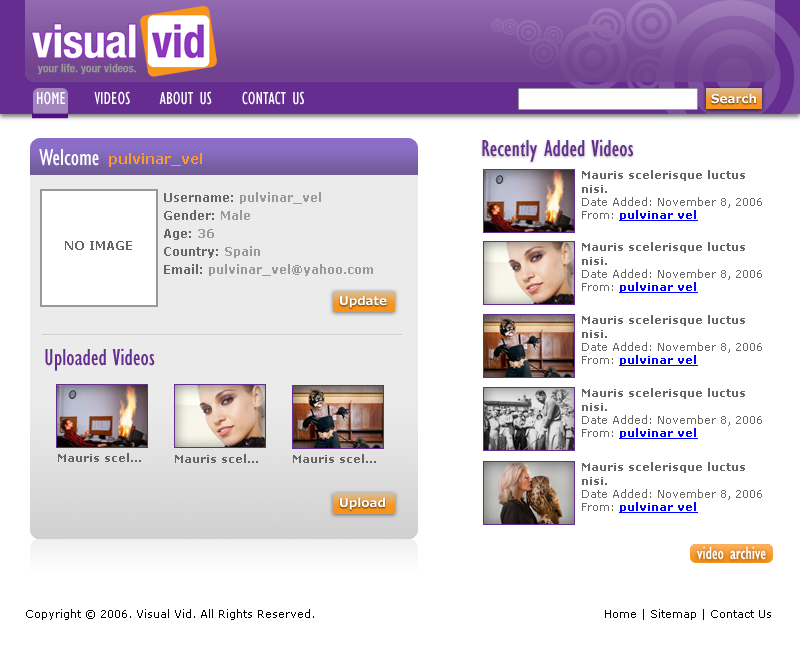
<style>
.page{position:relative;width:800px;height:654px;background:#ffffff}
.page>*{position:absolute;margin:0}
.t1{font:18px "GillSansMT-Condensed";color:#ffffff}
.t2{font:12px "Verdana-Bold";color:#ffffff}
.t3{font:24px "GillSansMT-Condensed";color:#ffffff}
.t4{font:24px "GillSansMT-Condensed";color:#662d91}
.t5{font:14px "Verdana-Bold";color:#ff9933}
.t6{font:11px "Verdana";color:#666666}
.t7{font:11px "Verdana-Bold";color:#666666}
.t8{font:11px "Verdana-Bold";color:#0000ff;text-decoration:underline}
.t9{font:12px/18px "Verdana-Bold";color:#999999}
.t10{font:12px/18px "Verdana-Bold";color:#666666}
.t11{font:12px "Verdana-Bold";color:#666666}
.t12{font:11px "Verdana";color:#000000}
</style>
<div class="page">
<p class="t1" style="left:37px;top:91px;width:267px;height:14px">HOME     VIDEOS     ABOUT US     CONTACT US</p>
<p class="t2" style="left:711px;top:93px;width:45px;height:11px">Search</p>
<p class="t3" style="left:39px;top:149px;width:60px;height:17px">Welcome</p>
<p class="t4" style="left:482px;top:139px;width:151px;height:23px">Recently Added Videos</p>
<p class="t5" style="left:109px;top:153px;width:93px;height:14px">pulvinar_vel</p>
<p class="t6" style="left:582px;top:170px;width:180px;height:51px"><span class="t7">Mauris scelerisque luctus nisi.<br></span>Date Added: November 8, 2006<br>From: <span class="t8">pulvinar vel</span></p>
<p class="t9" style="left:164px;top:192px;width:209px;height:84px;text-align:justify"><span class="t10">Username: </span>pulvinar_vel<br><span class="t10">Gender:</span> Male<br><span class="t10">Age: </span>36<br><span class="t10">Country:</span> Spain<br><span class="t10">Email:</span> pulvinar_vel@yahoo.com</p>
<p class="t11" style="left:65px;top:241px;width:67px;height:9px">NO IMAGE</p>
<p class="t6" style="left:582px;top:242px;width:180px;height:51px"><span class="t7">Mauris scelerisque luctus nisi.<br></span>Date Added: November 8, 2006<br>From: <span class="t8">pulvinar vel</span></p>
<p class="t2" style="left:340px;top:295px;width:47px;height:13px">Update</p>
<p class="t6" style="left:582px;top:315px;width:180px;height:51px"><span class="t7">Mauris scelerisque luctus nisi.<br></span>Date Added: November 8, 2006<br>From: <span class="t8">pulvinar vel</span></p>
<p class="t4" style="left:45px;top:348px;width:110px;height:23px">Uploaded Videos</p>
<p class="t6" style="left:582px;top:388px;width:180px;height:51px"><span class="t7">Mauris scelerisque luctus nisi.<br></span>Date Added: November 8, 2006<br>From: <span class="t8">pulvinar vel</span></p>
<p class="t7" style="left:58px;top:453px;width:83px;height:9px">Mauris scel...</p>
<p class="t7" style="left:175px;top:454px;width:83px;height:9px">Mauris scel...</p>
<p class="t7" style="left:293px;top:454px;width:83px;height:9px">Mauris scel...</p>
<p class="t6" style="left:582px;top:462px;width:180px;height:51px"><span class="t7">Mauris scelerisque luctus nisi.<br></span>Date Added: November 8, 2006<br>From: <span class="t8">pulvinar vel</span></p>
<p class="t2" style="left:340px;top:497px;width:45px;height:13px">Upload</p>
<p class="t1" style="left:697px;top:546px;width:69px;height:14px">video archive</p>
<p class="t12" style="left:26px;top:609px;width:288px;height:11px">Copyright © 2006. Visual Vid. All Rights Reserved.</p>
<p class="t12" style="left:605px;top:609px;width:166px;height:11px">Home | Sitemap | Contact Us</p>
</div>
